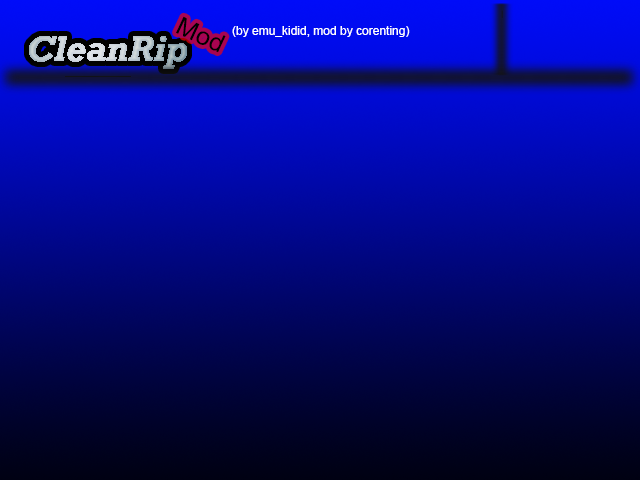
<style>
.page{position:relative;width:640px;height:480px}
.page>*{position:absolute;margin:0}
.t1{font:24.9px "ArialMT";color:#000000;scale:1.03 1}
.t2{font:12px "ArialMT";color:#ffffff}
</style>
<div class="page">
<p class="t1" style="left:176px;top:16px;width:50px;height:37px;rotate:25deg">Mod</p>
<p class="t2" style="left:232px;top:26px;width:178px;height:11px">(by emu_kidid, mod by corenting)</p>
</div>
